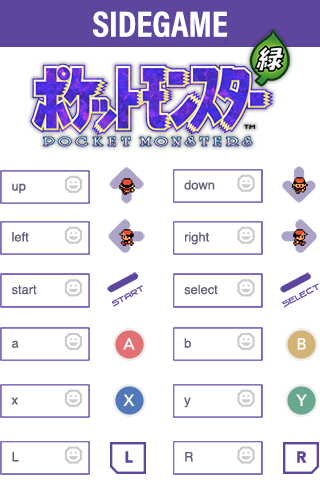
<style>
.page{position:relative;width:320px;height:491px;background:#ffffff}
.page>*{position:absolute;margin:0}
.t1{font:36.3px "AcuminProCond-Bold";color:#ffffff;text-transform:uppercase}
.t2{font:12.9px "Helvetica";color:#645f78}
.t3{font:15.8px "Avenir-Medium";color:#ffffff}
.t4{font:15.8px "Avenir-Black";color:#5e469f}
</style>
<div class="page">
<p class="t1" style="left:93px;top:11px;width:135px;height:26px">Sidegame</p>
<p class="t2" style="left:12px;top:183px;width:14px;height:11px">up</p>
<p class="t2" style="left:184px;top:180px;width:31px;height:10px">down</p>
<p class="t2" style="left:12px;top:232px;width:17px;height:10px">left</p>
<p class="t2" style="left:185px;top:232px;width:24px;height:13px">right</p>
<p class="t2" style="left:11px;top:285px;width:26px;height:10px">start</p>
<p class="t2" style="left:184px;top:284px;width:34px;height:11px">select</p>
<p class="t2" style="left:12px;top:340px;width:7px;height:8px">a</p>
<p class="t3" style="left:123px;top:338px;width:12px;height:12px">A</p>
<p class="t2" style="left:184px;top:338px;width:7px;height:10px">b</p>
<p class="t3" style="left:297px;top:338px;width:9px;height:12px">B</p>
<p class="t2" style="left:11px;top:397px;width:7px;height:8px">x</p>
<p class="t3" style="left:123px;top:394px;width:12px;height:12px">X</p>
<p class="t2" style="left:184px;top:397px;width:7px;height:11px">y</p>
<p class="t3" style="left:296px;top:394px;width:11px;height:12px">Y</p>
<p class="t2" style="left:12px;top:452px;width:7px;height:10px">L</p>
<p class="t4" style="left:125px;top:451px;width:8px;height:12px">L</p>
<p class="t2" style="left:185px;top:452px;width:8px;height:10px">R</p>
<p class="t4" style="left:297px;top:451px;width:10px;height:12px">R</p>
</div>
